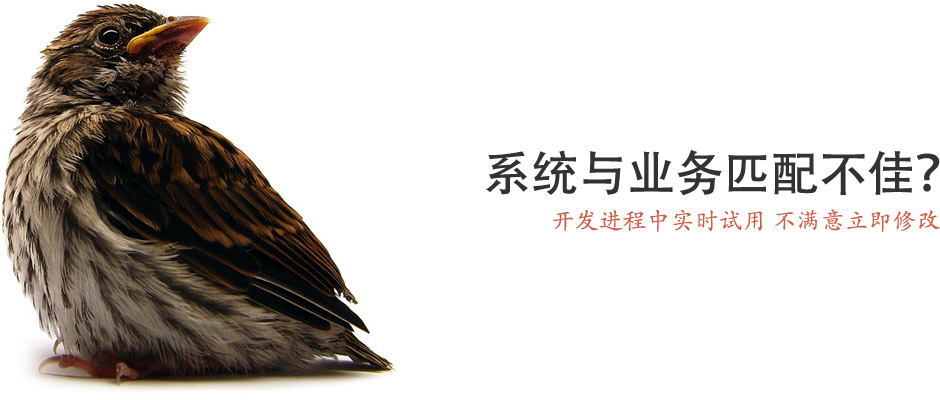
<style>
.page{position:relative;width:940px;height:400px;background:#ffffff}
.page>*{position:absolute;margin:0}
.t1{font:48px "AdobeHeitiStd-Regular";color:#333333}
.t2{font:24px "STKaiti";color:#cc5e47}
</style>
<div class="page">
<p class="t1" style="left:486px;top:149px;width:454px;height:47px">系统与业务匹配不佳？</p>
<p class="t2" style="left:553px;top:209px;width:388px;height:24px">开发进程中实时试用 不满意立即修改</p>
</div>
